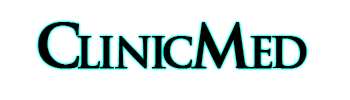
<style>
.page{position:relative;width:350px;height:100px;background:#ffffff}
.page>*{position:absolute;margin:0}
.t1{font:47px "AnUnfortunateEventDeWarped";color:#010101;font-variant:small-caps;font-weight:bold}
</style>
<div class="page">
<p class="t1" style="left:38px;top:22px;width:269px;height:47px">ClinicMed</p>
</div>
